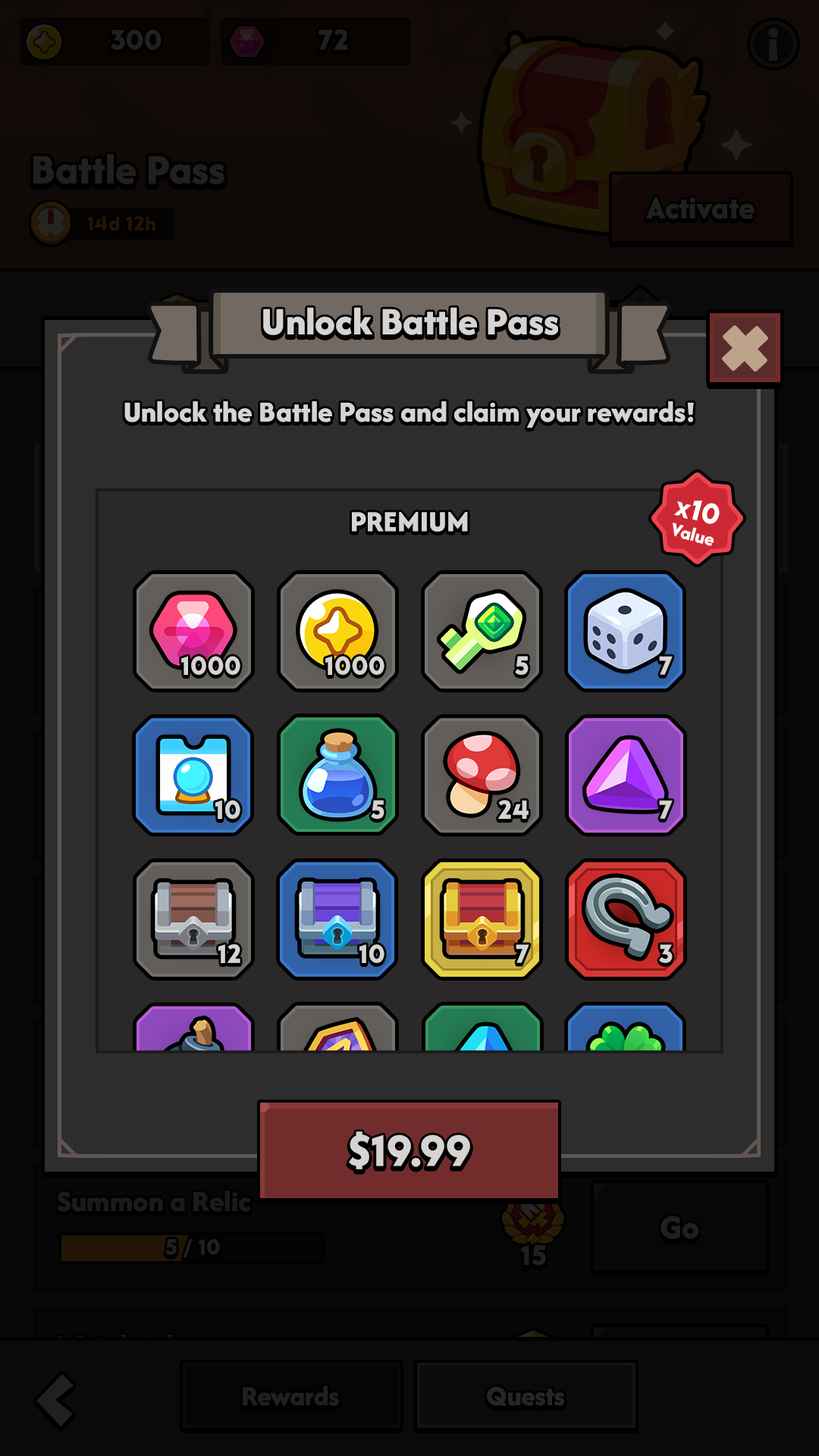
<style>
.page{position:relative;width:819px;height:1456px}
.page>*{position:absolute;margin:0}
.t1{font:40.2px "AfacadFlux-ExtraBold";color:#d6d4d3}
.t2{font:30.3px "AfacadFlux-ExtraBold";color:#d6d4d3}
.t3{font:30.3px "LTAvocado-Bold";color:#ffffff}
.t4{font:30.3px "AfacadFlux-ExtraBold";color:#d6d4d3;text-transform:uppercase}
.t5{font:19.7px "AfacadFlux-ExtraBold";color:#ffffff}
.t6{font:27.3px "LTAvocado-Bold";color:#d6d4d3}
.t7{font:45.5px "LTAvocado-Bold";color:#d6d4d3}
</style>
<div class="page">
<p class="t1" style="left:263px;top:307px;width:295px;height:28px">Unlock Battle Pass</p>
<p class="t2" style="left:124px;top:401px;width:570px;height:27px">Unlock the Battle Pass and claim your rewards!</p>
<p class="t3" style="left:673px;top:500px;width:47px;height:24px;rotate:15deg">x10</p>
<p class="t4" style="left:352px;top:512px;width:116px;height:20px">Premium</p>
<p class="t5" style="left:673px;top:522px;width:41px;height:24px;rotate:15deg">Value</p>
<p class="t6" style="left:181px;top:656px;width:59px;height:19px">1000</p>
<p class="t6" style="left:325px;top:656px;width:59px;height:19px">1000</p>
<p class="t6" style="left:515px;top:656px;width:14px;height:19px">5</p>
<p class="t6" style="left:659px;top:656px;width:14px;height:19px">7</p>
<p class="t6" style="left:215px;top:800px;width:25px;height:19px">10</p>
<p class="t6" style="left:371px;top:800px;width:13px;height:19px">5</p>
<p class="t6" style="left:497px;top:800px;width:32px;height:19px">24</p>
<p class="t6" style="left:659px;top:800px;width:14px;height:19px">7</p>
<p class="t6" style="left:218px;top:944px;width:22px;height:19px">12</p>
<p class="t6" style="left:359px;top:944px;width:25px;height:19px">10</p>
<p class="t6" style="left:516px;top:944px;width:13px;height:19px">7</p>
<p class="t6" style="left:659px;top:944px;width:14px;height:19px">3</p>
<p class="t7" style="left:349px;top:1131px;width:121px;height:38px">$19.99</p>
</div>
